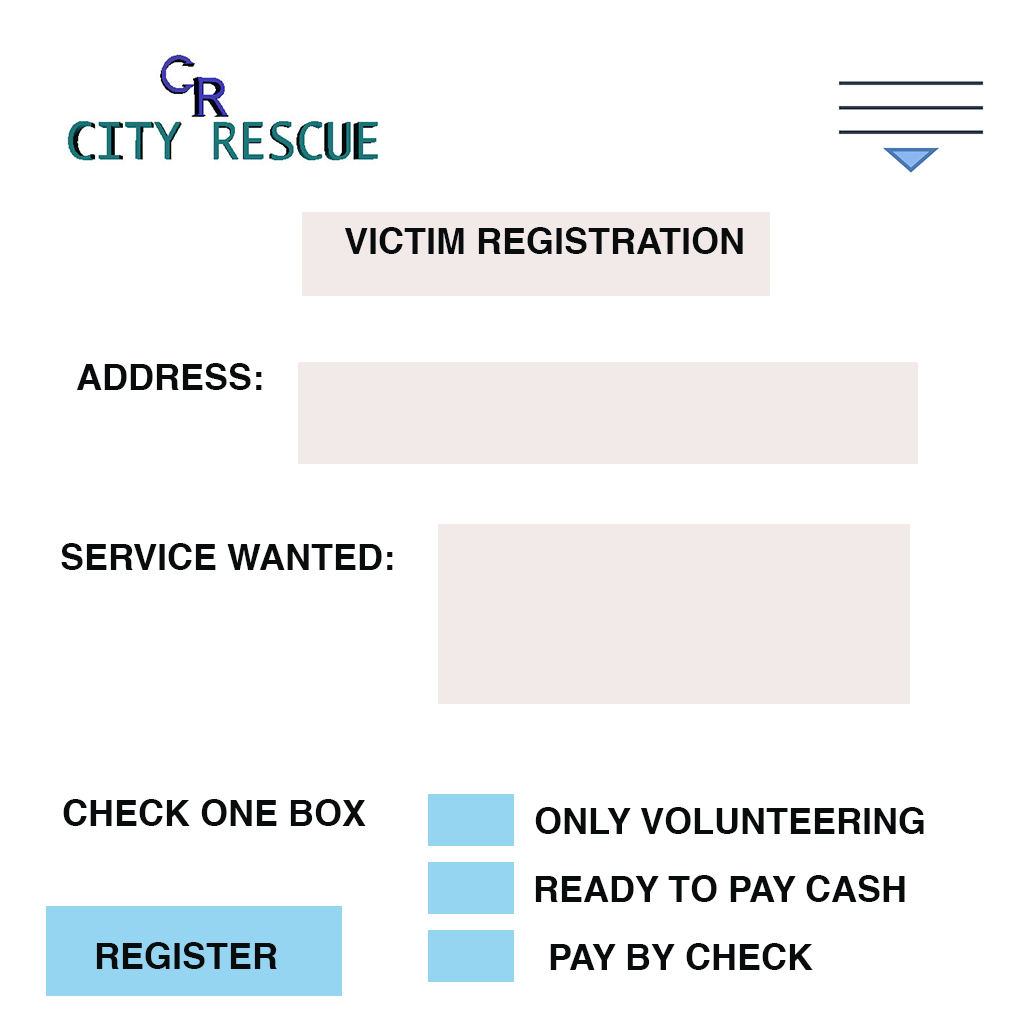
<style>
.page{position:relative;width:1024px;height:1024px;background:#ffffff}
.page>*{position:absolute;margin:0}
.t1{font:36px "Helvetica-Bold";color:#090c0d;text-transform:uppercase}
</style>
<div class="page">
<p class="t1" style="left:345px;top:227px;width:398px;height:27px">Victim registration</p>
<p class="t1" style="left:76px;top:363px;width:186px;height:27px">Address:</p>
<p class="t1" style="left:61px;top:543px;width:332px;height:27px">service wanted:</p>
<p class="t1" style="left:63px;top:799px;width:303px;height:27px">check one box</p>
<p class="t1" style="left:535px;top:807px;width:389px;height:27px">only volunteering</p>
<p class="t1" style="left:535px;top:875px;width:370px;height:27px">ready to pay cash</p>
<p class="t1" style="left:96px;top:942px;width:181px;height:27px">register</p>
<p class="t1" style="left:550px;top:943px;width:263px;height:27px">pay by check</p>
</div>
